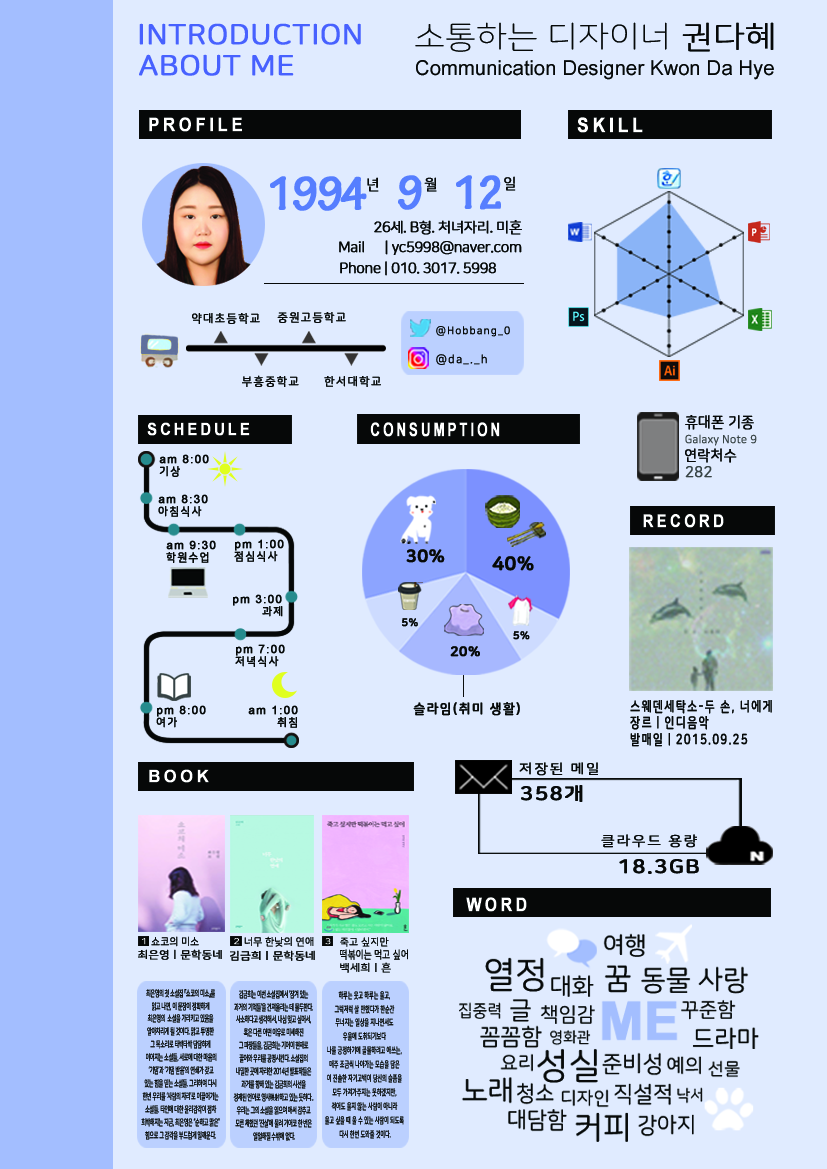
<style>
.page{position:relative;width:827px;height:1169px;background:#e0ebff}
.page>*{position:absolute;margin:0}
.t1{font:28.1px "NanumSquareRoundR";letter-spacing:0.005em;color:#4761ff;font-weight:bold;scale:1.07 1}
.t2{font:31.4px "NanumSquareRoundL";letter-spacing:0.005em;color:#060808;scale:1.08 1}
.t3{font:31.4px "NanumSquareRoundL";letter-spacing:0.005em;color:#060808;font-weight:bold;scale:1.08 1}
.t4{font:20.7px "ArialNarrow";letter-spacing:0.005em;color:#060808;scale:1.19 1}
.t5{font:18.6px "Arial-BoldMT";letter-spacing:0.2em;color:#ffffff;font-weight:bold;scale:0.89 1}
.t6{font:20.3px "Arial-BoldMT";letter-spacing:0.2em;color:#ffffff;font-weight:bold;scale:0.85 1}
.t7{font:50px "TektonPro-BoldCond";letter-spacing:-0.05em;color:#567eff;font-weight:bold}
.t8{font:14.6px "NanumSquareRoundR";letter-spacing:-0.05em;color:#060808;font-weight:bold}
.t9{font:11.5px "NanumSquareRoundR";letter-spacing:0.1em;color:#060808;font-weight:bold}
.t10{font:10.5px "NanumSquareRoundR";letter-spacing:0.1em;color:#060808;font-weight:bold;scale:0.95 1}
.t11{font:11.5px "NanumSquareRoundR";letter-spacing:0.1em;color:#060808;font-weight:bold;scale:0.96 1}
.t12{font:17px "Arial-BoldMT";letter-spacing:0.2em;color:#ffffff;font-weight:bold;scale:0.85 1}
.t13{font:18.6px "Arial-BoldMT";letter-spacing:0.2em;color:#ffffff;font-weight:bold;scale:0.71 1}
.t14{font:15.2px "NanumSquareRoundR";color:#060808;font-weight:bold;scale:0.92 1}
.t15{font:11.3px "NanumSquareRoundR";color:#384345;font-weight:bold;scale:0.94 1}
.t16{font:14.8px "NanumSquareRoundR";color:#060808;font-weight:bold;scale:0.95 1}
.t17{font:11.5px "ArialMT";letter-spacing:0.1em;color:#060808;font-weight:bold}
.t18{font:11.5px "NanumSquareRoundB";letter-spacing:0.1em;color:#060808;font-weight:bold;scale:0.94 1}
.t19{font:15.3px "NanumSquareRoundR";color:#384345;font-weight:bold;scale:0.96 1}
.t20{font:17.8px "Arial-BoldMT";letter-spacing:0.2em;color:#ffffff;font-weight:bold;scale:0.83 1}
.t21{font:17.6px "NanumSquareRoundEB";color:#070809;font-weight:bold}
.t22{font:18.9px "NanumSquareRoundEB";color:#060808;font-weight:bold}
.t23{font:10.8px "NanumSquareRoundEB";color:#060808;font-weight:bold}
.t24{font:13.5px "NanumSquareRoundEB";color:#060808;font-weight:bold}
.t25{font:13.5px "NanumSquareRoundB";letter-spacing:0.1em;color:#070909;font-weight:bold;scale:0.94 1}
.t26{font:14.2px "NanumSquareRoundB";letter-spacing:0.1em;color:#070909;font-weight:bold;scale:0.77 1}
.t27{font:17px "Arial-BoldMT";letter-spacing:0.2em;color:#ffffff;font-weight:bold;scale:0.96 1}
.t28{font:13.4px "NanumSquareRoundR";letter-spacing:0.1em;color:#070909;font-weight:bold;scale:1.1 1}
.t29{font:19.3px "NanumSquareRoundB";letter-spacing:0.05em;color:#070909;font-weight:bold;scale:1.12 1}
.t30{font:18.6px "Arial-BoldMT";letter-spacing:0.2em;color:#ffffff;font-weight:bold;scale:0.84 1}
.t31{font:8.2px "NanumSquareRoundR";font-weight:bold;scale:1.27 1}
.t32{font:10.8px "NanumSquareRoundR";color:#060808;font-weight:bold;scale:0.9 1}
.t33{font:8.2px "NanumSquareRoundR";color:#ffffff;font-weight:bold;scale:1.3 1}
.t34{font:10.5px "NanumSquareRoundR";color:#060808;font-weight:bold;scale:0.94 1}
.t35{font:8.1px "NanumSquareRoundR";font-weight:bold;scale:1.25 1}
.t36{font:10.1px "NanumSquareRoundR";color:#060808;font-weight:bold}
.t37{font:10.5px "NanumSquareRoundR";color:#060808;font-weight:bold;scale:1.08 1}
.t38{font:10.5px "NanumSquareRoundR";color:#060808;font-weight:bold;scale:1.1 1}
.t39{font:11.1px "NanumSquareRoundR";color:#060808;font-weight:bold;scale:0.78 1}
.t40{font:10.4px "NanumSquareRoundR";color:#060808;font-weight:bold;scale:1.06 1}
.t41{font:8.7px/12.9px "NanumSquareRoundR";letter-spacing:-0.05em;color:#060808;font-weight:bold;scale:0.56 1}
.t42{font:8.7px/12.9px "NanumSquareRoundR";letter-spacing:-0.065em;color:#060808;font-weight:bold;scale:0.56 1}
.t43{font:8.7px/12.9px "Gulim";letter-spacing:-0.065em;color:#060808;font-weight:bold;scale:0.56 1}
.t44{font:8.7px/13.9px "NanumSquareRoundR";letter-spacing:0.005em;color:#060808;font-weight:bold;scale:0.56 1}
</style>
<div class="page">
<p class="t1" style="left:139px;top:23px;width:222px;height:22px">INTRODUCTION</p>
<p class="t2" style="left:415px;top:22px;width:359px;height:30px">소통하는 디자이너<span class="t3"> 권다혜</span></p>
<p class="t1" style="left:139px;top:54px;width:155px;height:22px">ABOUT ME</p>
<p class="t4" style="left:416px;top:60px;width:358px;height:20px">Communication Designer Kwon Da Hye</p>
<p class="t5" style="left:149px;top:117px;width:93px;height:15px">PROFILE</p>
<p class="t6" style="left:577px;top:117px;width:66px;height:16px">SKILL</p>
<p class="t7" style="left:270px;top:176px;width:97px;height:35px">1994</p>
<p class="t8" style="left:367px;top:177px;width:12px;height:15px">년</p>
<p class="t7" style="left:398px;top:175px;width:24px;height:35px">9</p>
<p class="t8" style="left:424px;top:177px;width:13px;height:15px">월</p>
<p class="t7" style="left:456px;top:175px;width:45px;height:35px">12</p>
<p class="t8" style="left:504px;top:176px;width:12px;height:15px">일</p>
<p class="t8" style="left:374px;top:220px;width:148px;height:15px">26세. B형. 처녀자리. 미혼</p>
<p class="t8" style="left:339px;top:240px;width:183px;height:15px">Mail      | yc5998@naver.com</p>
<p class="t8" style="left:340px;top:261px;width:156px;height:15px">Phone | 010. 3017. 5998</p>
<p class="t9" style="left:192px;top:313px;width:68px;height:11px">약대초등학교</p>
<p class="t9" style="left:277px;top:312px;width:69px;height:11px">중원고등학교</p>
<p class="t10" style="left:436px;top:326px;width:74px;height:11px">@Hobbang_0</p>
<p class="t11" style="left:436px;top:354px;width:51px;height:11px">@da_._h</p>
<p class="t9" style="left:242px;top:375px;width:57px;height:12px">부흥중학교</p>
<p class="t9" style="left:324px;top:376px;width:57px;height:11px">한서대학교</p>
<p class="t12" style="left:147px;top:422px;width:103px;height:14px">SCHEDULE</p>
<p class="t13" style="left:370px;top:422px;width:130px;height:15px">CONSUMPTION</p>
<p class="t14" style="left:685px;top:415px;width:69px;height:15px">휴대폰 기종</p>
<p class="t15" style="left:685px;top:434px;width:72px;height:12px">Galaxy Note 9</p>
<p class="t16" style="left:685px;top:448px;width:52px;height:15px">연락처수</p>
<p class="t17" style="left:159px;top:454px;width:50px;height:10px">am 8:00</p>
<p class="t18" style="left:159px;top:466px;width:21px;height:11px">기상</p>
<p class="t19" style="left:685px;top:466px;width:27px;height:12px">282</p>
<p class="t17" style="left:158px;top:494px;width:50px;height:10px">am 8:30</p>
<p class="t18" style="left:158px;top:506px;width:44px;height:11px">아침식사</p>
<p class="t20" style="left:643px;top:514px;width:81px;height:14px">RECORD</p>
<p class="t17" style="left:166px;top:540px;width:50px;height:10px">am 9:30</p>
<p class="t17" style="left:235px;top:539px;width:49px;height:12px">pm 1:00</p>
<p class="t18" style="left:166px;top:552px;width:43px;height:11px">학원수업</p>
<p class="t18" style="left:234px;top:551px;width:44px;height:11px">점심식사</p>
<p class="t21" style="left:406px;top:549px;width:39px;height:14px">30%</p>
<p class="t22" style="left:492px;top:556px;width:42px;height:15px">40%</p>
<p class="t17" style="left:233px;top:594px;width:49px;height:12px">pm 3:00</p>
<p class="t18" style="left:262px;top:606px;width:21px;height:11px">과제</p>
<p class="t23" style="left:402px;top:618px;width:16px;height:9px">5%</p>
<p class="t23" style="left:513px;top:631px;width:17px;height:9px">5%</p>
<p class="t17" style="left:236px;top:644px;width:49px;height:12px">pm 7:00</p>
<p class="t24" style="left:450px;top:646px;width:30px;height:11px">20%</p>
<p class="t18" style="left:235px;top:656px;width:44px;height:11px">저녁식사</p>
<p class="t25" style="left:413px;top:702px;width:107px;height:14px">슬라임(취미 생활)</p>
<p class="t26" style="left:630px;top:700px;width:142px;height:14px">스웨덴세탁소-두 손, 너에게</p>
<p class="t17" style="left:157px;top:705px;width:49px;height:12px">pm 8:00</p>
<p class="t17" style="left:248px;top:705px;width:50px;height:10px">am 1:00</p>
<p class="t18" style="left:156px;top:717px;width:21px;height:11px">여가</p>
<p class="t18" style="left:277px;top:717px;width:20px;height:11px">취침</p>
<p class="t26" style="left:630px;top:716px;width:79px;height:14px">장르ㅣ인디음악</p>
<p class="t26" style="left:630px;top:733px;width:118px;height:14px">발매일ㅣ2015.09.25</p>
<p class="t27" style="left:149px;top:769px;width:60px;height:14px">BOOK</p>
<p class="t28" style="left:519px;top:762px;width:79px;height:14px">저장된 메일</p>
<p class="t29" style="left:521px;top:785px;width:62px;height:17px">358개</p>
<p class="t28" style="left:601px;top:834px;width:96px;height:14px">클라우드 용량</p>
<p class="t29" style="left:619px;top:859px;width:80px;height:15px">18.3GB</p>
<p class="t30" style="left:466px;top:897px;width:61px;height:15px">WORD</p>
<p class="t31" style="left:142px;top:938px;width:4px;height:7px">1</p>
<p class="t32" style="left:151px;top:936px;width:48px;height:11px">쇼코의 미소</p>
<p class="t33" style="left:234px;top:938px;width:6px;height:7px">2</p>
<p class="t34" style="left:244px;top:936px;width:70px;height:11px">너무 한낮의 연애</p>
<p class="t35" style="left:325px;top:938px;width:6px;height:7px">3</p>
<p class="t36" style="left:340px;top:937px;width:49px;height:10px">죽고 싶지만</p>
<p class="t37" style="left:138px;top:949px;width:84px;height:11px">최은영ㅣ문학동네</p>
<p class="t38" style="left:230px;top:950px;width:85px;height:11px">김금희ㅣ문학동네</p>
<p class="t39" style="left:340px;top:949px;width:68px;height:11px">떡볶이는 먹고 싶어</p>
<p class="t40" style="left:340px;top:962px;width:51px;height:11px">백세희ㅣ흔</p>
<p class="t41" style="left:141px;top:989px;width:79px;height:151px;text-align:center">최은영의 첫 소설집 『쇼코의 미소』를 <br>읽고 나면, 이 문장이 정확하게 <br>최은영의  소설을 가리키고 있음을 <br>알아차리게 될 것이다. 맑고 투명한 <br>그 목소리로 타박타박 담담하게 <br>이어지는 소설들, 서로에 대한 마음의<br> ‘기댐’과 ‘기댐 받음’의 연쇄가 갖고 <br>있는 힘을 믿는 소설들. 그리하여 다시 <br>한번 우리를 ‘사람의 자리’로 이끌어가는 <br>소설들. 타인에 대한 윤리감각이 점차 <br>희박해지는 지금, 최은영은 “순하고 맑은” <br>힘으로 그 감각을 부드럽게 일깨운다.</p>
<p class="t42" style="left:233px;top:990px;width:81px;height:151px;text-align:center">김금희는 이번 소설집에서 ‘잠겨 있는 <br>과거의 기억들’을 건져올리는 데 몰두한다. <br>사소하다고 생각해서, 내심 잊고 싶어서, <br>혹은 다른 어떤 이유로 미세해진 <br>그 파장들을, 김금희는 기어이 현재로 <br>끌어와 우리를 공명시킨다. 소설집의 <br>내밀한 곳에 자리한 2014년 발표작들은 <br>과거를 향해 있는 김금희의 시선을 <br>정제된 언어로 영사<span class="t43">映射</span>하고 있는 듯하다.. <br>우리는 그의 소설을 읽으며 애써 감추고 <br>모른 체했던 ‘진실’에 물려 기어코 한 번은 <br>얼얼해질 수밖에 없다.</p>
<p class="t44" style="left:325px;top:991px;width:79px;height:148px;text-align:center">하루는 웃고 하루는 울고, <br>그럭저럭 살 만했다가 한순간 <br>무너지는 일상을 지나면서도 <br>우울에 도취되기보다 <br>나를 긍정하기에 골몰하려고 애쓰는, <br>매주 조금씩 나아가는 모습을 담은 <br>이 진솔한 자기고백이 당신의 슬픔을 <br>모두 가져가주지는 못하겠지만, <br>적어도 울지 않는 사람이 아니라 <br>울고 싶을 때 울 수 있는 사람이 되도록 <br>다시 한번 도와줄 것이다.</p>
</div>
